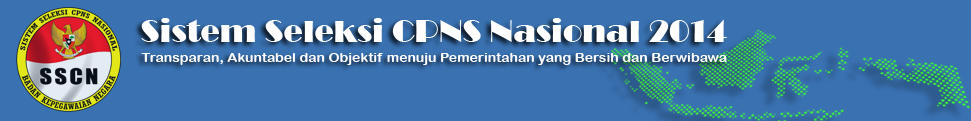
<style>
.page{position:relative;width:971px;height:121px;background:#3971b1}
.page>*{position:absolute;margin:0}
.t1{font:32px "Broadway";color:#ffffff}
.t2{font:13.3px "ArialRoundedMTBold";color:#fffefe;scale:1.05 1}
</style>
<div class="page">
<p class="t1" style="left:141px;top:18px;width:586px;height:24px">Sistem Seleksi CPNS Nasional 2014</p>
<p class="t2" style="left:141px;top:53px;width:586px;height:12px">Transparan, Akuntabel dan Objektif menuju Pemerintahan yang Bersih dan Berwibawa</p>
</div>
